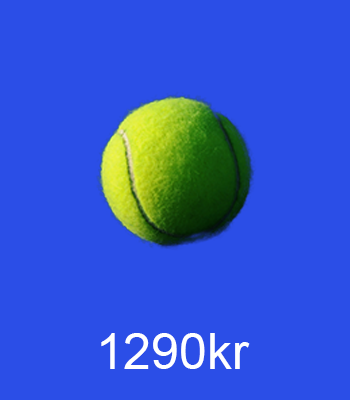
<style>
.page{position:relative;width:350px;height:400px;background:#2b4ee7}
.page>*{position:absolute;margin:0}
.t1{font:50px "ArialMT";color:#feffff}
</style>
<div class="page">
<p class="t1" style="left:101px;top:333px;width:149px;height:36px">1290kr</p>
</div>
